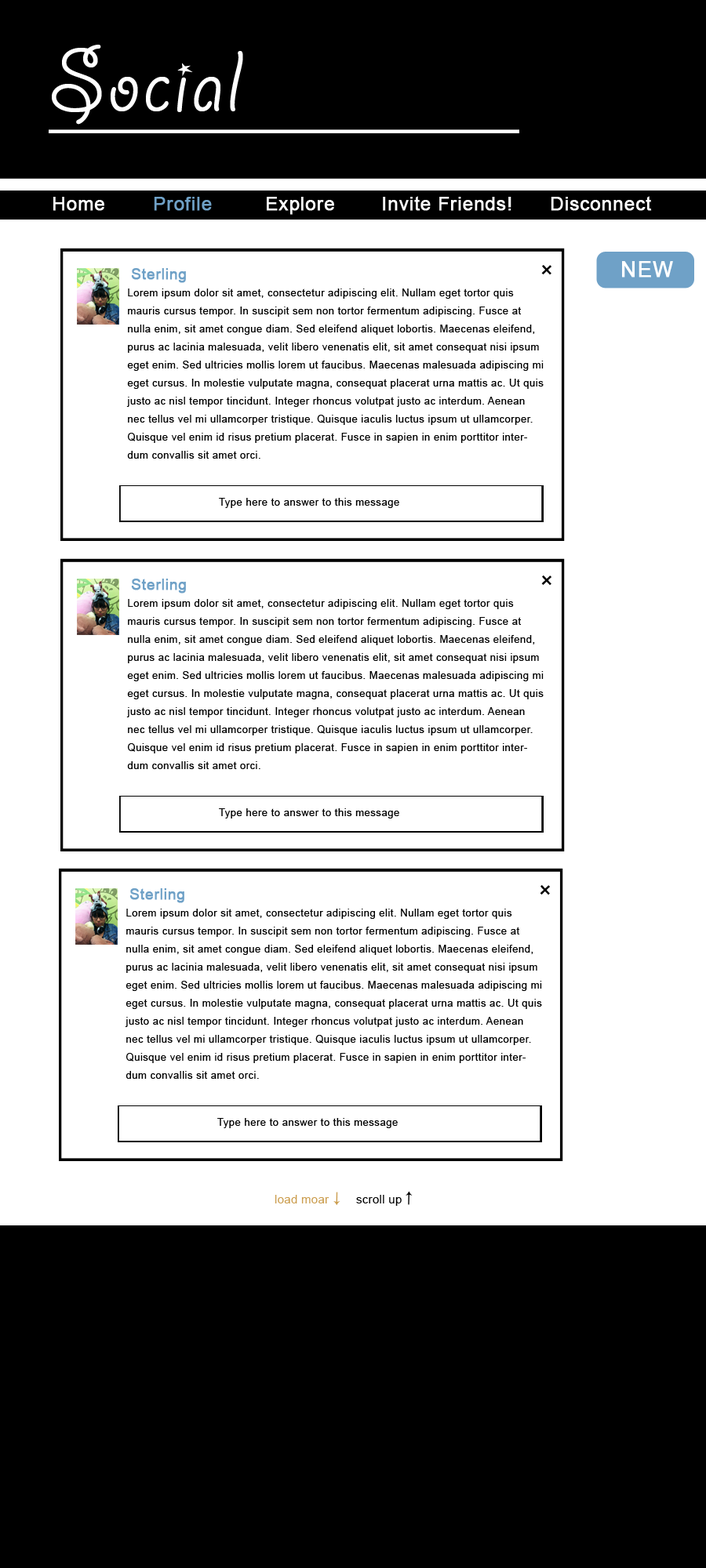
<style>
.page{position:relative;width:706px;height:1568px;background:#ffffff}
.page>*{position:absolute;margin:0}
.t1{font:97.2px "GiddyupStd";letter-spacing:0.02em;color:#ffffff}
.t2{font:18.8px "ArialMT";letter-spacing:0.02em;color:#ffffff;font-weight:bold}
.t3{font:18.8px "ArialMT";letter-spacing:0.02em;color:#6fa1c7;font-weight:bold}
.t4{font:14.9px "ArialMT";letter-spacing:0.02em;color:#6fa1c7;font-weight:bold}
.t5{font:24.3px "ArialMT";letter-spacing:0.04em;color:#000000}
.t6{font:21.2px "ArialMT";letter-spacing:0.04em;color:#ffffff;font-weight:bold}
.t7{font:10.2px/18px "ArialMT";letter-spacing:0.04em;color:#000000}
.t8{font:10.2px "ArialMT";letter-spacing:0.04em;color:#000000}
.t9{font:11.8px "ArialMT";letter-spacing:0.02em;color:#cb9d4e}
.t10{font:11.8px "ArialMT";letter-spacing:0.02em;color:#000000}
</style>
<div class="page">
<p class="t1" style="left:52px;top:45px;width:191px;height:80px">Social</p>
<p class="t2" style="left:53px;top:197px;width:51px;height:14px">Home</p>
<p class="t3" style="left:154px;top:197px;width:58px;height:14px">Profile</p>
<p class="t2" style="left:267px;top:197px;width:67px;height:18px">Explore</p>
<p class="t2" style="left:383px;top:196px;width:128px;height:15px">Invite Friends!</p>
<p class="t2" style="left:550px;top:196px;width:102px;height:15px">Disconnect</p>
<p class="t4" style="left:131px;top:268px;width:55px;height:15px">Sterling</p>
<p class="t5" style="left:541px;top:265px;width:10px;height:10px;rotate:47deg">+</p>
<p class="t6" style="left:622px;top:261px;width:51px;height:17px">NEW</p>
<p class="t7" style="left:126px;top:289px;width:417px;height:170px">Lorem ipsum dolor sit amet, consectetur adipiscing elit. Nullam eget tortor quis mauris cursus tempor. In suscipit sem non tortor fermentum adipiscing. Fusce at nulla enim, sit amet congue diam. Sed eleifend aliquet lobortis. Maecenas eleifend, purus ac lacinia malesuada, velit libero venenatis elit, sit amet consequat nisi ipsum eget enim. Sed ultricies mollis lorem ut faucibus. Maecenas malesuada adipiscing mi eget cursus. In molestie vulputate magna, consequat placerat urna mattis ac. Ut quis justo ac nisl tempor tincidunt. Integer rhoncus volutpat justo ac interdum. Aenean nec tellus vel mi ullamcorper tristique. Quisque iaculis luctus ipsum ut ullamcorper. Quisque vel enim id risus pretium placerat. Fusce in sapien in enim porttitor interdum convallis sit amet orci.</p>
<p class="t8" style="left:219px;top:498px;width:180px;height:10px">Type here to answer to this message</p>
<p class="t4" style="left:131px;top:579px;width:55px;height:14px">Sterling</p>
<p class="t5" style="left:541px;top:575px;width:10px;height:11px;rotate:47deg">+</p>
<p class="t7" style="left:126px;top:599px;width:417px;height:170px">Lorem ipsum dolor sit amet, consectetur adipiscing elit. Nullam eget tortor quis mauris cursus tempor. In suscipit sem non tortor fermentum adipiscing. Fusce at nulla enim, sit amet congue diam. Sed eleifend aliquet lobortis. Maecenas eleifend, purus ac lacinia malesuada, velit libero venenatis elit, sit amet consequat nisi ipsum eget enim. Sed ultricies mollis lorem ut faucibus. Maecenas malesuada adipiscing mi eget cursus. In molestie vulputate magna, consequat placerat urna mattis ac. Ut quis justo ac nisl tempor tincidunt. Integer rhoncus volutpat justo ac interdum. Aenean nec tellus vel mi ullamcorper tristique. Quisque iaculis luctus ipsum ut ullamcorper. Quisque vel enim id risus pretium placerat. Fusce in sapien in enim porttitor interdum convallis sit amet orci.</p>
<p class="t8" style="left:219px;top:808px;width:180px;height:10px">Type here to answer to this message</p>
<p class="t4" style="left:129px;top:888px;width:55px;height:15px">Sterling</p>
<p class="t5" style="left:539px;top:885px;width:11px;height:10px;rotate:47deg">+</p>
<p class="t7" style="left:125px;top:909px;width:417px;height:170px">Lorem ipsum dolor sit amet, consectetur adipiscing elit. Nullam eget tortor quis mauris cursus tempor. In suscipit sem non tortor fermentum adipiscing. Fusce at nulla enim, sit amet congue diam. Sed eleifend aliquet lobortis. Maecenas eleifend, purus ac lacinia malesuada, velit libero venenatis elit, sit amet consequat nisi ipsum eget enim. Sed ultricies mollis lorem ut faucibus. Maecenas malesuada adipiscing mi eget cursus. In molestie vulputate magna, consequat placerat urna mattis ac. Ut quis justo ac nisl tempor tincidunt. Integer rhoncus volutpat justo ac interdum. Aenean nec tellus vel mi ullamcorper tristique. Quisque iaculis luctus ipsum ut ullamcorper. Quisque vel enim id risus pretium placerat. Fusce in sapien in enim porttitor interdum convallis sit amet orci.</p>
<p class="t8" style="left:217px;top:1118px;width:180px;height:10px">Type here to answer to this message</p>
<p class="t9" style="left:274px;top:1195px;width:55px;height:8px">load moar</p>
<p class="t10" style="left:356px;top:1195px;width:45px;height:11px">scroll up</p>
</div>
